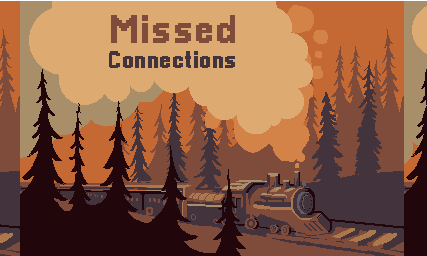
<style>
.page{position:relative;width:427px;height:256px;background:#ddab72}
.page>*{position:absolute;margin:0}
.t1{font:40.5px "Pixellari";letter-spacing:0.025em;color:#7f4c3c}
.t2{font:24px "Pixellari";letter-spacing:0.025em;color:#43333c}
.t3{font:24px "Pixellari";letter-spacing:0.025em;color:#7f4c3c}
</style>
<div class="page">
<p class="t1" style="left:111px;top:15px;width:124px;height:28px">Missed</p>
<p class="t2" style="left:109px;top:51px;width:126px;height:17px"><span class="t3"><br></span>Connections</p>
</div>
